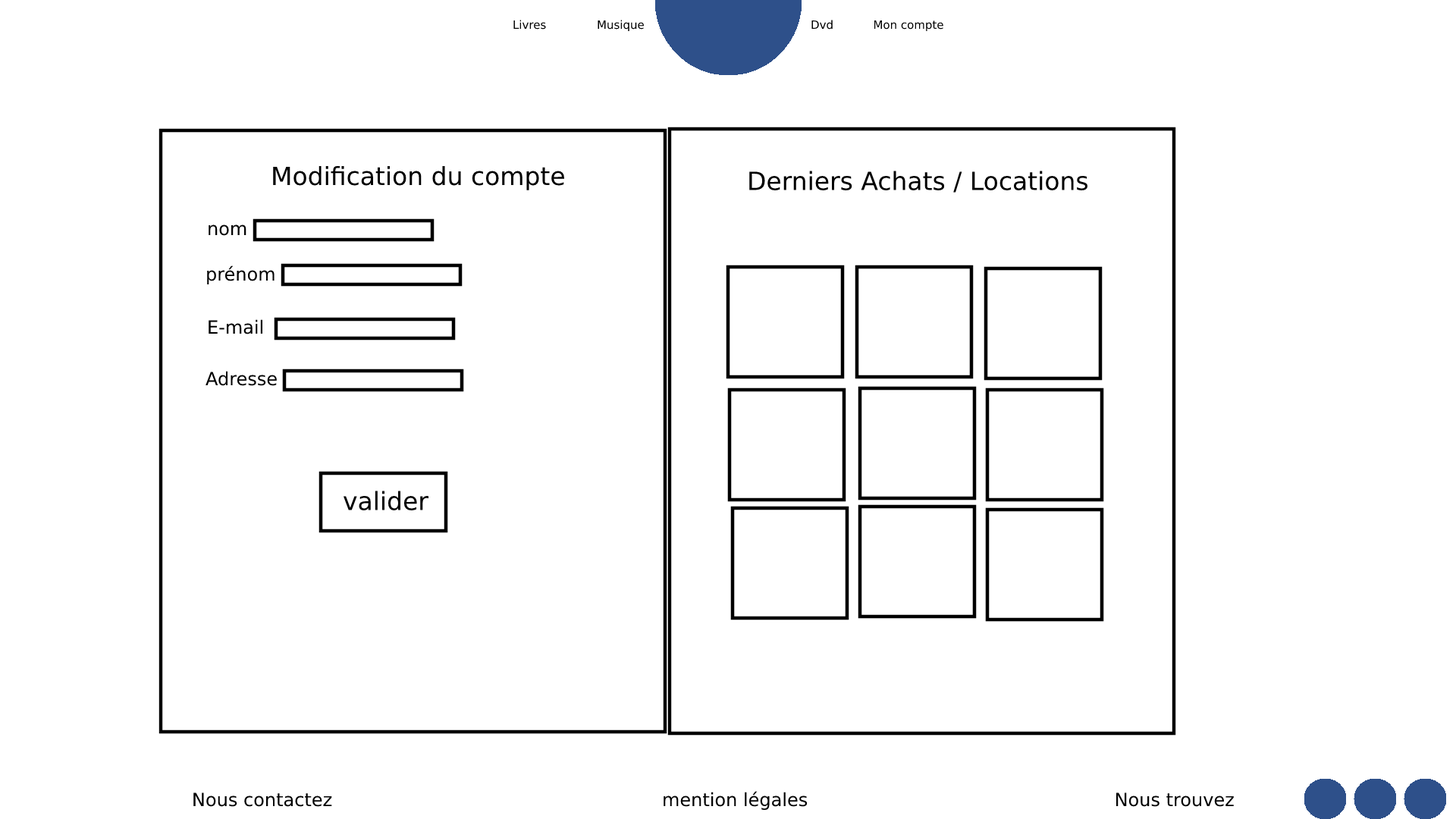
<style>
.page{position:relative;width:1456px;height:819px;background:#ffffff}
.page>*{position:absolute;margin:0}
.t1{font:25px "DejaVuSans";color:#000000}
.t2{font:18.2px "DejaVuSans";color:#000000}
</style>
<div class="page">
<p class="t1" style="left:273px;top:165px;width:291px;height:25px">Modification du compte</p>
<p class="t1" style="left:749px;top:171px;width:338px;height:22px">Derniers Achats / Locations</p>
<p class="t2" style="left:209px;top:224px;width:37px;height:12px">nom</p>
<p class="t2" style="left:207px;top:265px;width:68px;height:19px">prénom</p>
<p class="t2" style="left:209px;top:319px;width:53px;height:15px">E-mail</p>
<p class="t2" style="left:206px;top:371px;width:71px;height:15px">Adresse</p>
<p class="t1" style="left:343px;top:491px;width:85px;height:19px">valider</p>
</div>
